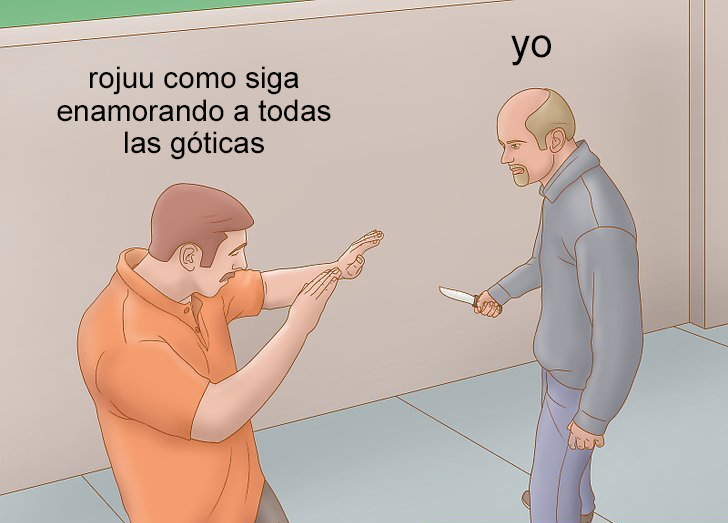
<style>
.page{position:relative;width:728px;height:523px}
.page>*{position:absolute;margin:0}
.t1{font:40.9px "ArialMT";color:#000000}
.t2{font:30px "ArialMT";color:#000000}
</style>
<div class="page">
<p class="t1" style="left:511px;top:35px;width:40px;height:31px">yo</p>
<p class="t2" style="left:57px;top:66px;width:274px;height:94px;text-align:center">rojuu como siga<br>enamorando a todas<br>las góticas</p>
</div>
